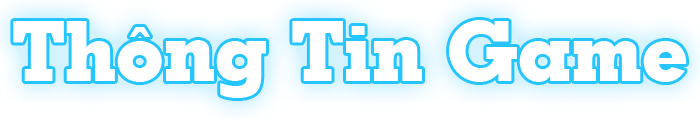
<style>
.page{position:relative;width:700px;height:120px;background:#ffffff}
.page>*{position:absolute;margin:0}
.t1{font:83.3px "GeoSlab703-Extra";color:#ffffff}
</style>
<div class="page">
<p class="t1" style="left:13px;top:20px;width:674px;height:78px">Thông Tin Game</p>
</div>
